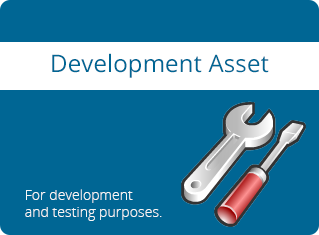
<style>
.page{position:relative;width:319px;height:235px;background:#006694}
.page>*{position:absolute;margin:0}
.t1{font:24px "OpenSans";letter-spacing:0.005em;color:#006694}
.t2{font:14px "OpenSans-Light";letter-spacing:0.005em;color:#f7f7f7}
</style>
<div class="page">
<p class="t1" style="left:52px;top:53px;width:217px;height:25px">Development Asset</p>
<p class="t2" style="left:25px;top:189px;width:137px;height:32px">For development<br>and testing purposes.</p>
</div>
